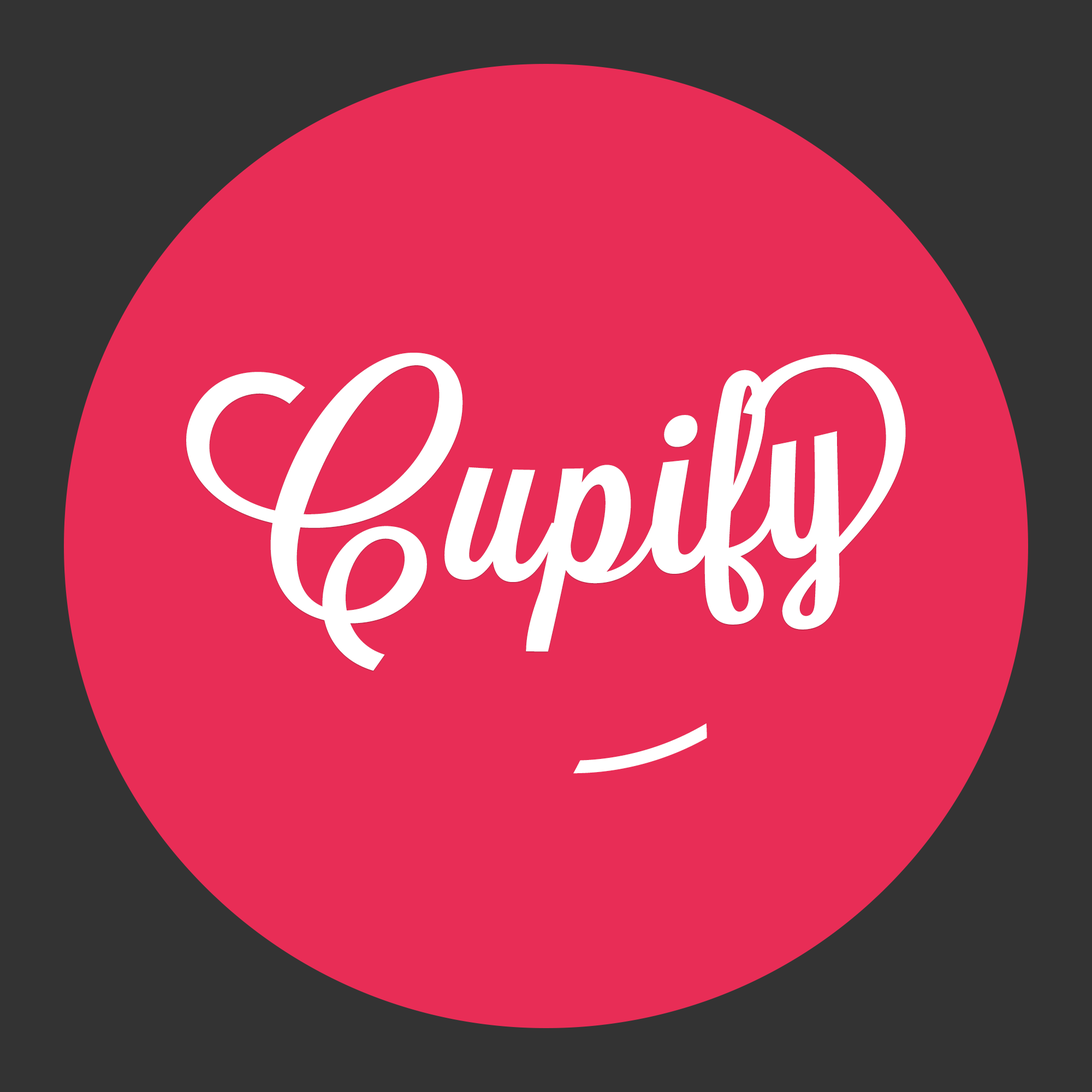
<style>
.page{position:relative;width:1092px;height:1092px;background:#e82d56}
.page>*{position:absolute;margin:0}
.t1{font:245.8px "Lavanderia-Sturdy";color:#ffffff}
.t2{font:246.5px "Lavanderia-Sturdy";color:#ffffff}
</style>
<div class="page">
<p class="t1" style="left:186px;top:353px;width:720px;height:318px">Cupify</p>
<p class="t2" style="left:573px;top:723px;width:134px;height:51px;rotate:-16deg">-</p>
</div>
